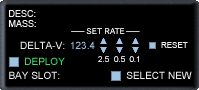
<style>
.page{position:relative;width:199px;height:90px;background:#000000}
.page>*{position:absolute;margin:0}
.t1{font:9px/10px "ArialMT";color:#eeeeee}
.t2{font:10px "ArialMT";color:#eeeeee}
.t3{font:10px "ArialMT";color:#9fc3e3}
.t4{font:8px "ArialMT";color:#eeeeee;font-variant:small-caps}
.t5{font:10px "ArialMT";color:#35de69}
</style>
<div class="page">
<p class="t1" style="left:9px;top:10px;width:27px;height:17px">DESC:<br>MASS:</p>
<p class="t2" style="left:20px;top:41px;width:45px;height:8px">DELTA-V:</p>
<p class="t3" style="left:71px;top:41px;width:24px;height:8px">123.4</p>
<p class="t4" style="left:161px;top:42px;width:27px;height:6px">RESET</p>
<p class="t5" style="left:25px;top:57px;width:40px;height:8px">DEPLOY</p>
<p class="t2" style="left:9px;top:71px;width:51px;height:8px">BAY SLOT:</p>
<p class="t2" style="left:126px;top:71px;width:66px;height:8px">SELECT NEW</p>
</div>
